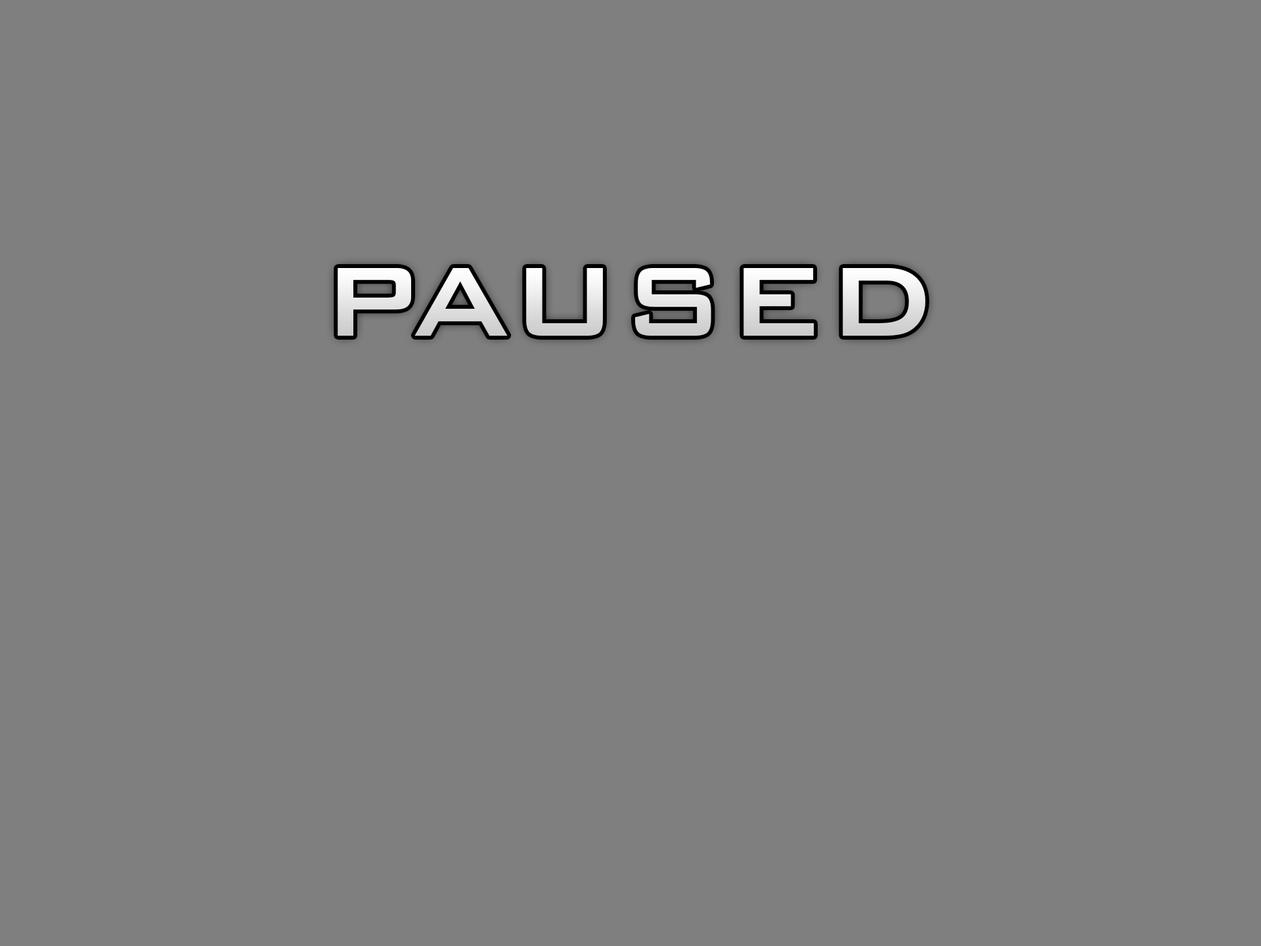
<style>
.page{position:relative;width:1261px;height:946px;background:#7f7f7f}
.page>*{position:absolute;margin:0}
.t1{font:131.3px "BankGothicBT-Medium"}
</style>
<div class="page">
<p class="t1" style="left:338px;top:268px;width:587px;height:68px">PAUSED</p>
</div>
